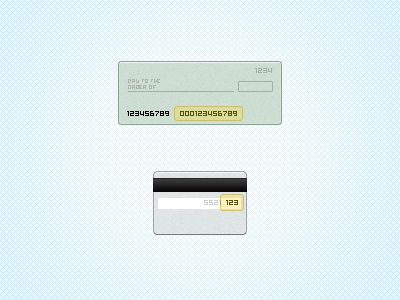
<style>
.page{position:relative;width:400px;height:300px}
.page>*{position:absolute;margin:0}
.t1{font:8px "04b03b";color:#a4b1a7}
.t2{font:6px/6px "04b03b";color:#aeb8ad}
.t3{font:8px "04b03b";color:#000000}
.t4{font:8px "04b03b";color:#594f14}
.t5{font:8px "04b03b";color:#cccccc}
</style>
<div class="page">
<p class="t1" style="left:255px;top:68px;width:17px;height:5px">1234</p>
<p class="t2" style="left:128px;top:79px;width:32px;height:10px">PAY TO THE<br>ORDER OF</p>
<p class="t3" style="left:127px;top:111px;width:42px;height:5px">123456789</p>
<p class="t4" style="left:180px;top:111px;width:57px;height:5px">000123456789</p>
<p class="t5" style="left:204px;top:200px;width:17px;height:5px">5521</p>
<p class="t4" style="left:226px;top:200px;width:12px;height:5px">123</p>
</div>
